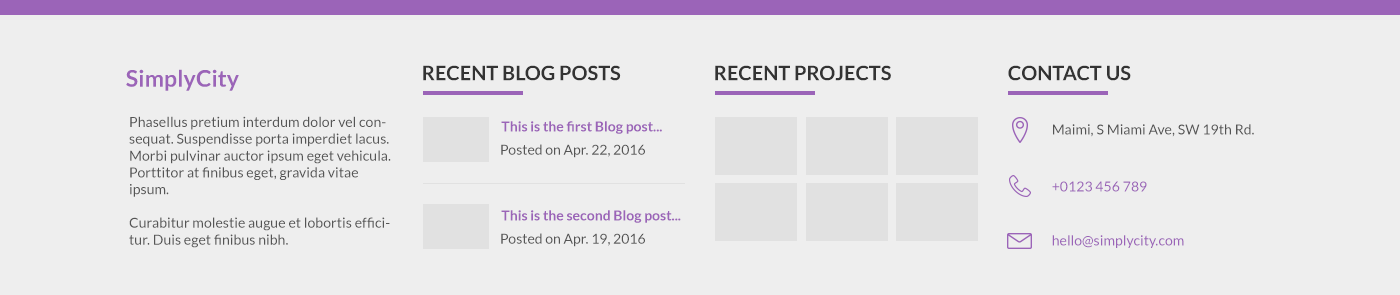
<style>
.page{position:relative;width:1400px;height:295px;background:#eeeeee}
.page>*{position:absolute;margin:0}
.t1{font:20px "Lato-Bold";color:#333333}
.t2{font:23px "Lato-Bold";letter-spacing:0.005em;color:#9b64b8}
.t3{font:14px "Lato-Regular";letter-spacing:0.005em;color:#555555}
.t4{font:14px "Lato-Bold";color:#9b64b8}
.t5{font:14px "Lato-Regular";color:#555555}
.t6{font:14px "Lato-Regular";letter-spacing:0.005em;color:#9b64b8}
</style>
<div class="page">
<p class="t1" style="left:423px;top:65px;width:198px;height:16px">RECENT BLOG POSTS</p>
<p class="t1" style="left:715px;top:65px;width:176px;height:16px">RECENT PROJECTS</p>
<p class="t1" style="left:1008px;top:65px;width:123px;height:16px">CONTACT US</p>
<p class="t2" style="left:126px;top:69px;width:113px;height:22px">SimplyCity</p>
<p class="t3" style="left:129px;top:116px;width:262px;height:132px">Phasellus pretium interdum dolor vel consequat. Suspendisse porta imperdiet lacus. Morbi pulvinar auctor ipsum eget vehicula. Porttitor at finibus eget, gravida vitae ipsum.<br><br>Curabitur molestie augue et lobortis efficitur. Duis eget finibus nibh.</p>
<p class="t4" style="left:501px;top:121px;width:161px;height:13px">This is the first Blog post...</p>
<p class="t3" style="left:1053px;top:124px;width:201px;height:13px">Maimi, S Miami Ave, SW 19th Rd.</p>
<p class="t5" style="left:501px;top:144px;width:144px;height:14px">Posted on Apr. 22, 2016</p>
<p class="t6" style="left:1052px;top:181px;width:95px;height:11px">+0123 456 789</p>
<p class="t4" style="left:501px;top:210px;width:180px;height:13px">This is the second Blog post...</p>
<p class="t5" style="left:501px;top:233px;width:144px;height:14px">Posted on Apr. 19, 2016</p>
<p class="t6" style="left:1052px;top:235px;width:132px;height:13px">hello@simplycity.com</p>
</div>
